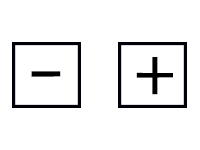
<style>
.page{position:relative;width:200px;height:150px;background:#ffffff}
.page>*{position:absolute;margin:0}
.t1{font:81.1px "Lora-Regular";color:#000000}
</style>
<div class="page">
<p class="t1" style="left:136px;top:57px;width:37px;height:38px">+</p>
<p class="t1" style="left:31px;top:71px;width:30px;height:6px">-</p>
</div>
